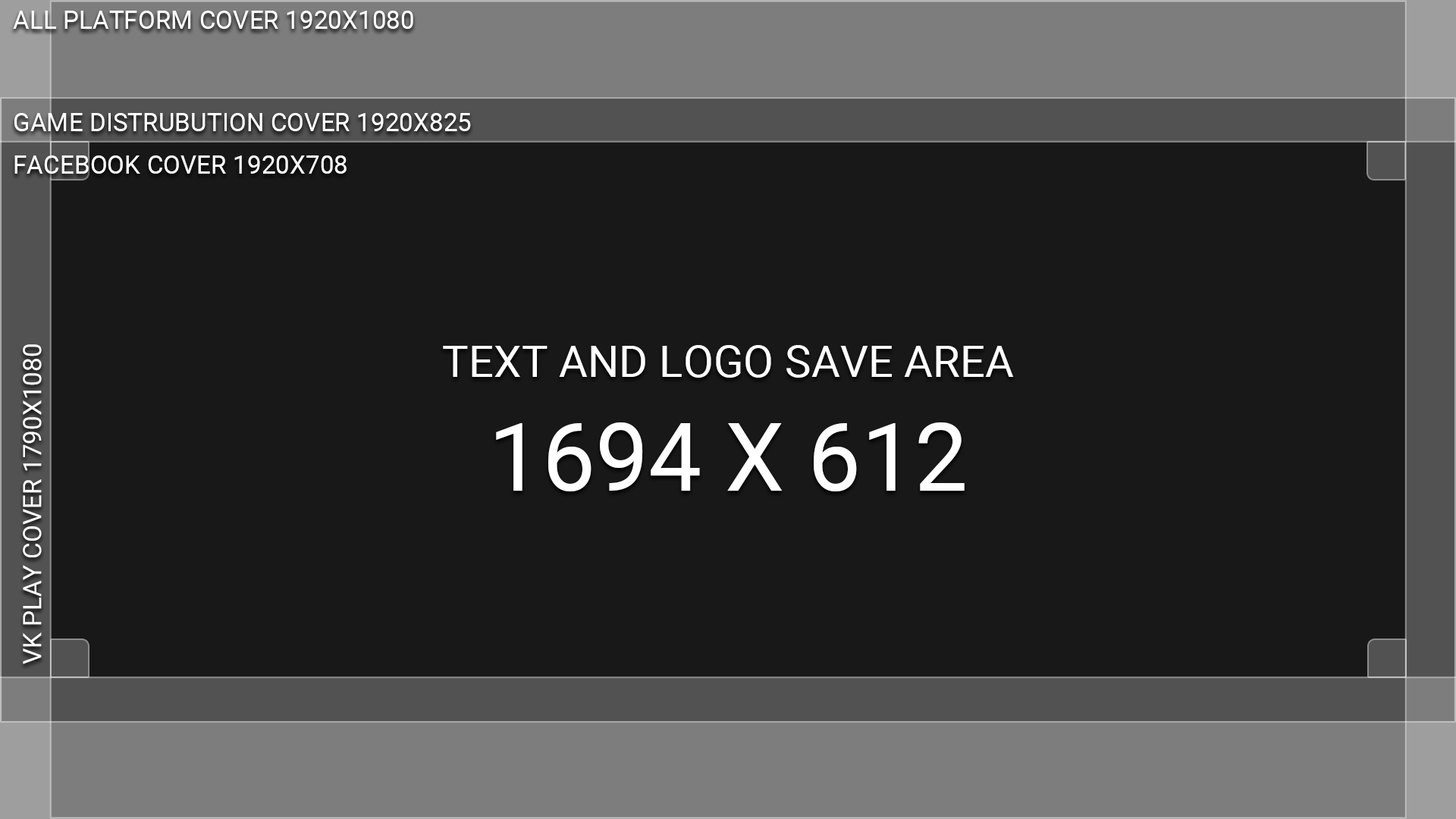
<style>
.page{position:relative;width:1456px;height:819px;background:#181818}
.page>*{position:absolute;margin:0}
.t1{font:25.3px "Roboto-Regular";color:#ffffff}
.t2{font:44.2px "Roboto-Regular";color:#ffffff}
.t3{font:94.8px "Roboto-Regular";color:#ffffff}
</style>
<div class="page">
<p class="t1" style="left:13px;top:11px;width:400px;height:18px">ALL PLATFORM COVER 1920X1080</p>
<p class="t1" style="left:14px;top:113px;width:457px;height:18px">GAME DISTRUBUTION COVER 1920X825</p>
<p class="t1" style="left:14px;top:155px;width:333px;height:19px">FACEBOOK COVER 1920X708</p>
<p class="t1" style="left:23px;top:344px;width:19px;height:320px;rotate:-90deg">VK PLAY COVER 1790X1080</p>
<p class="t2" style="left:443px;top:345px;width:571px;height:146px;text-align:center">TEXT AND LOGO SAVE AREA<br><span class="t3">1694 X 612</span></p>
</div>
